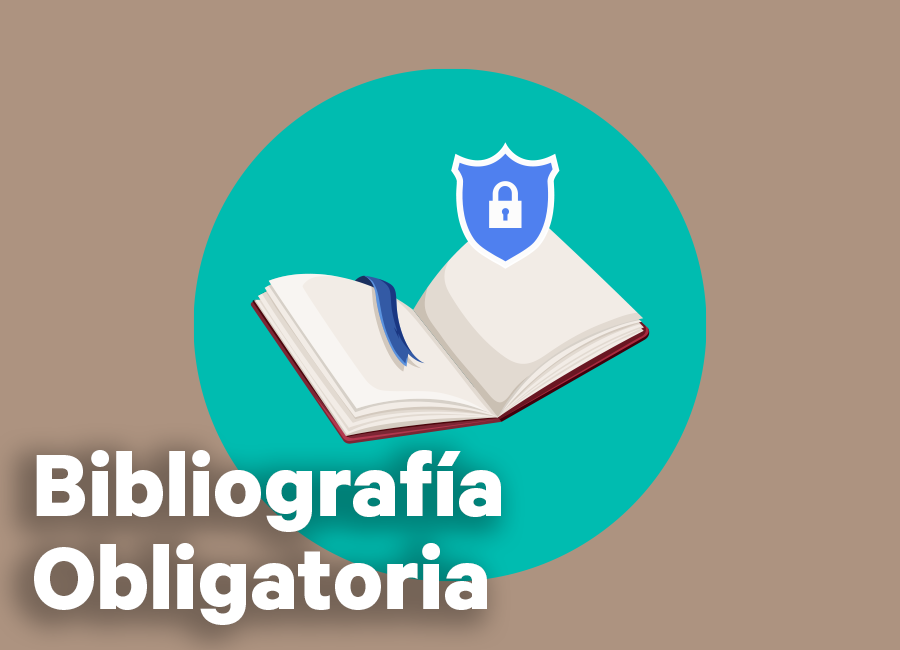
<style>
.page{position:relative;width:900px;height:650px;background:#ad9380}
.page>*{position:absolute;margin:0}
.t1{font:100px/93px "Calibre-Bold";color:#ffffff}
</style>
<div class="page">
<p class="t1" style="left:34px;top:450px;width:467px;height:175px">Bibliografía <br>Obligatoria</p>
</div>
